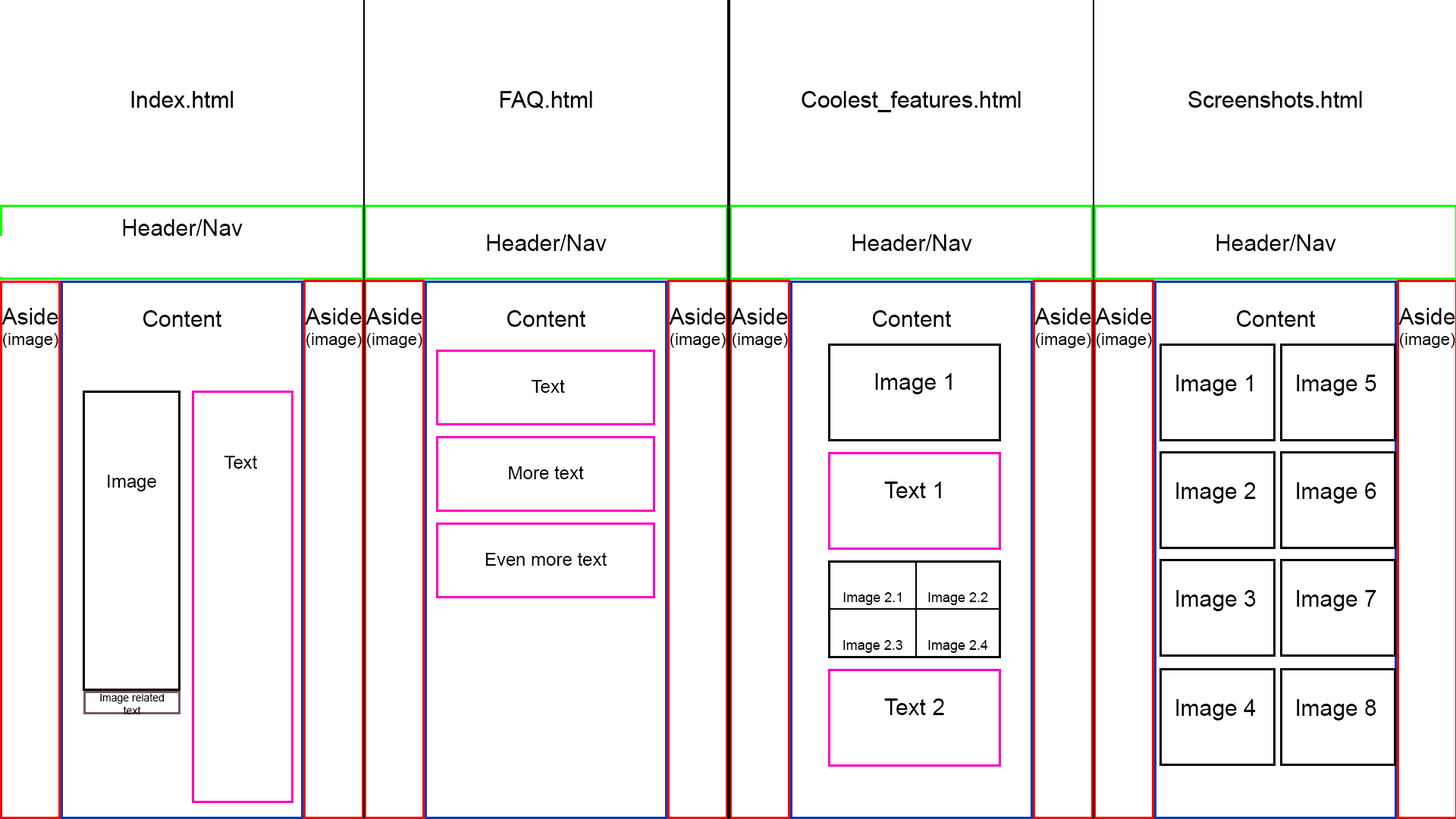
<style>
.page{position:relative;width:1456px;height:819px;background:#ffffff}
.page>*{position:absolute;margin:0}
.t1{font:22.7px "ArialMT";color:#000000}
.t2{font:16.7px "ArialMT";color:#000000}
.t3{font:18.2px "ArialMT";color:#000000}
.t4{font:13.6px "ArialMT";color:#000000}
.t5{font:10.6px "ArialMT";color:#000000}
</style>
<div class="page">
<p class="t1" style="left:131px;top:91px;width:102px;height:17px">Index.html</p>
<p class="t1" style="left:500px;top:91px;width:92px;height:18px">FAQ.html</p>
<p class="t1" style="left:802px;top:91px;width:219px;height:21px">Coolest_features.html</p>
<p class="t1" style="left:1188px;top:91px;width:174px;height:17px">Screenshots.html</p>
<p class="t1" style="left:123px;top:219px;width:120px;height:17px">Header/Nav</p>
<p class="t1" style="left:487px;top:234px;width:120px;height:17px">Header/Nav</p>
<p class="t1" style="left:852px;top:234px;width:120px;height:17px">Header/Nav</p>
<p class="t1" style="left:1216px;top:234px;width:120px;height:17px">Header/Nav</p>
<p class="t2" style="left:2px;top:308px;width:56px;height:40px;text-align:center"><span class="t1">Aside</span>(image)</p>
<p class="t1" style="left:143px;top:310px;width:78px;height:17px">Content</p>
<p class="t2" style="left:305px;top:308px;width:57px;height:40px;text-align:center"><span class="t1">Aside<br></span>(image)</p>
<p class="t2" style="left:366px;top:308px;width:56px;height:40px;text-align:center"><span class="t1">Aside</span>(image)</p>
<p class="t1" style="left:507px;top:310px;width:78px;height:17px">Content</p>
<p class="t2" style="left:669px;top:308px;width:57px;height:40px;text-align:center"><span class="t1">Aside</span>(image)</p>
<p class="t2" style="left:731px;top:308px;width:57px;height:40px;text-align:center"><span class="t1">Aside</span>(image)</p>
<p class="t1" style="left:873px;top:310px;width:78px;height:17px">Content</p>
<p class="t2" style="left:1034px;top:308px;width:57px;height:40px;text-align:center"><span class="t1">Aside</span>(image)</p>
<p class="t2" style="left:1095px;top:308px;width:57px;height:40px;text-align:center"><span class="t1">Aside</span>(image)</p>
<p class="t1" style="left:1237px;top:310px;width:78px;height:17px">Content</p>
<p class="t2" style="left:1398px;top:308px;width:57px;height:40px;text-align:center"><span class="t1">Aside</span>(image)</p>
<p class="t1" style="left:875px;top:373px;width:77px;height:21px">Image 1</p>
<p class="t1" style="left:1176px;top:375px;width:77px;height:21px">Image 1</p>
<p class="t1" style="left:1297px;top:375px;width:79px;height:21px">Image 5</p>
<p class="t3" style="left:531px;top:379px;width:34px;height:14px">Text</p>
<p class="t3" style="left:224px;top:455px;width:33px;height:14px">Text</p>
<p class="t3" style="left:509px;top:466px;width:75px;height:13px">More text</p>
<p class="t3" style="left:108px;top:475px;width:48px;height:16px">Image</p>
<p class="t1" style="left:884px;top:482px;width:57px;height:16px">Text 1</p>
<p class="t1" style="left:1176px;top:482px;width:80px;height:22px">Image 2</p>
<p class="t1" style="left:1297px;top:482px;width:79px;height:22px">Image 6</p>
<p class="t3" style="left:485px;top:552px;width:122px;height:14px">Even more text</p>
<p class="t4" style="left:843px;top:592px;width:59px;height:13px">Image 2.1</p>
<p class="t4" style="left:928px;top:592px;width:60px;height:13px">Image 2.2</p>
<p class="t1" style="left:1176px;top:590px;width:80px;height:21px">Image 3</p>
<p class="t1" style="left:1297px;top:590px;width:79px;height:21px">Image 7</p>
<p class="t4" style="left:843px;top:640px;width:59px;height:13px">Image 2.3</p>
<p class="t4" style="left:928px;top:640px;width:60px;height:13px">Image 2.4</p>
<p class="t5" style="left:100px;top:693px;width:64px;height:21px;text-align:center">Image related<br>text</p>
<p class="t1" style="left:884px;top:698px;width:60px;height:17px">Text 2</p>
<p class="t1" style="left:1176px;top:699px;width:80px;height:21px">Image 4</p>
<p class="t1" style="left:1297px;top:699px;width:79px;height:21px">Image 8</p>
</div>
